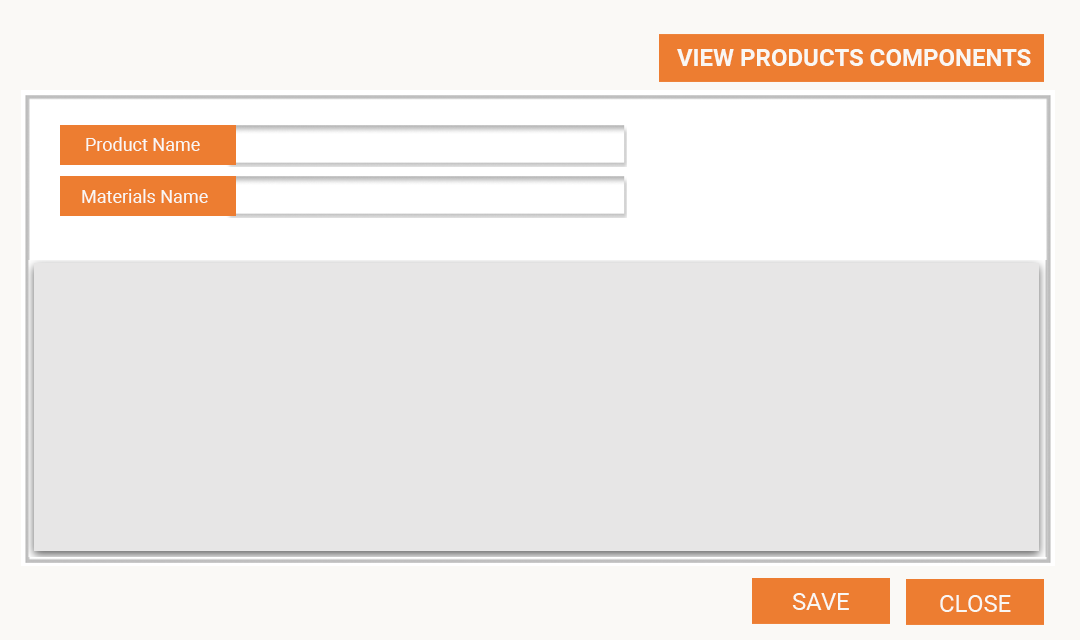
<style>
.page{position:relative;width:1080px;height:640px;background:#e7e6e6}
.page>*{position:absolute;margin:0}
.t1{font:22.9px "Roboto-Bold";color:#f9f7f3;scale:1.05 1}
.t2{font:18px "Roboto-Regular";color:#f9f7f3}
.t3{font:24px "Roboto-Regular";color:#f9f7f3}
</style>
<div class="page">
<p class="t1" style="left:677px;top:49px;width:354px;height:17px">VIEW PRODUCTS COMPONENTS</p>
<p class="t2" style="left:86px;top:137px;width:114px;height:14px">Product Name</p>
<p class="t2" style="left:82px;top:189px;width:126px;height:14px">Materials Name</p>
<p class="t3" style="left:792px;top:593px;width:57px;height:17px">SAVE</p>
<p class="t3" style="left:940px;top:595px;width:71px;height:17px">CLOSE</p>
</div>
